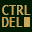
<style>
.page{position:relative;width:32px;height:32px;background:#011b02}
.page>*{position:absolute;margin:0}
.t1{font:12px/12px "Monaco";letter-spacing:0.06em;color:#c8a55a}
</style>
<div class="page">
<p class="t1" style="left:2px;top:5px;width:29px;height:22px">CTRL<br>DEL</p>
<p class="t1" style="left:2px;top:5px;width:29px;height:22px">CTRL<br>DEL</p>
</div>
